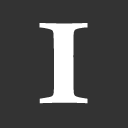
<style>
.page{position:relative;width:128px;height:128px;background:#333333}
.page>*{position:absolute;margin:0}
.t1{font:115.7px "CalisMTBol";color:#ffffff;scale:1.12 1}
</style>
<div class="page">
<p class="t1" style="left:39px;top:23px;width:49px;height:81px">I</p>
</div>
